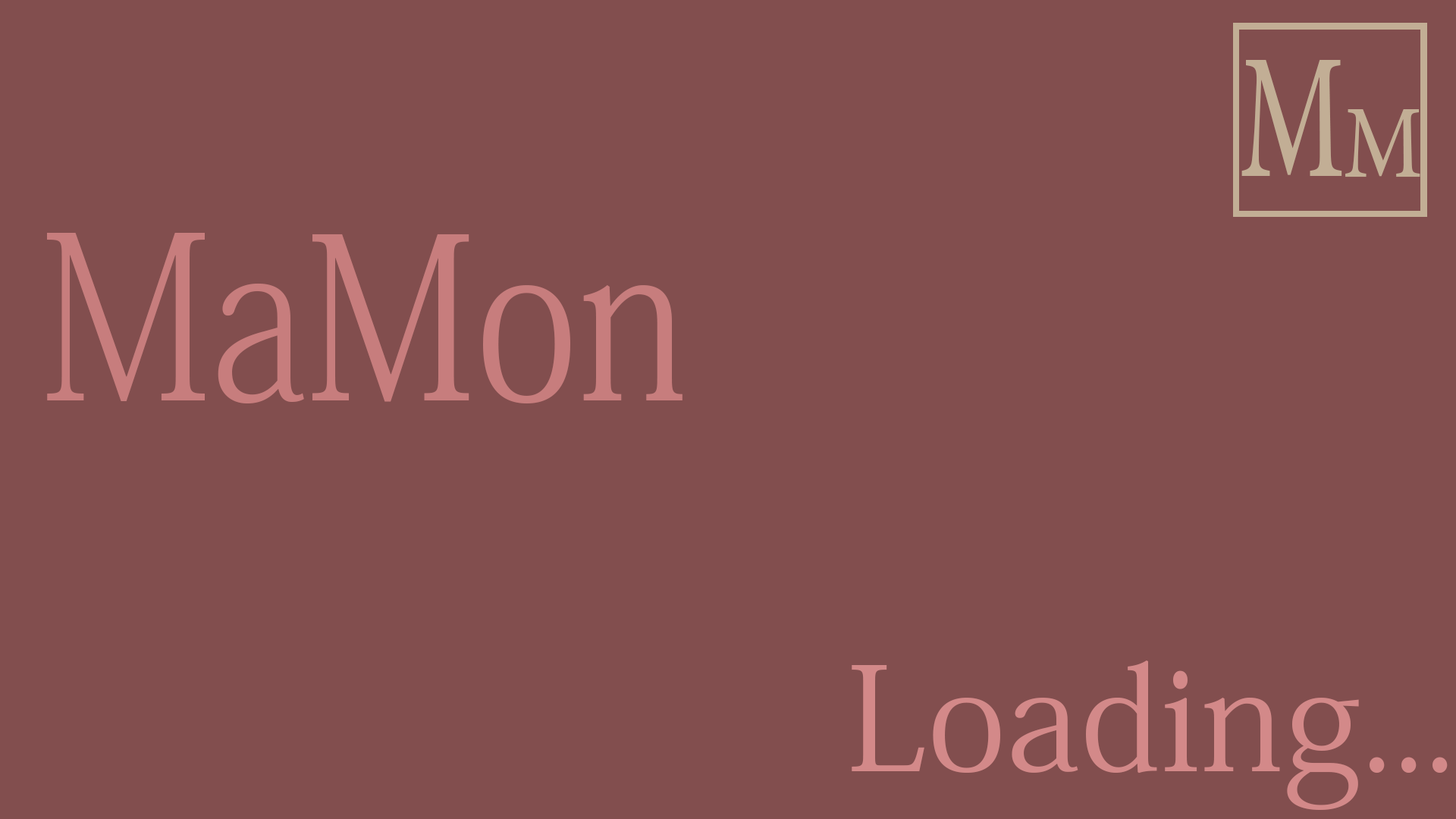
<style>
.page{position:relative;width:1456px;height:819px;background:#824e4e}
.page>*{position:absolute;margin:0}
.t1{font:176.3px "AdobeHebrew-Regular";color:#c2ae95;scale:0.66 1}
.t2{font:101.9px "AdobeHebrew-Regular";color:#c2ae95;scale:0.85 1}
.t3{font:224.2px "AdobeKaitiStd-Regular";color:#c77d7d;scale:0.83 1}
.t4{font:227.5px "AdobeFangsongStd-Regular";color:#c77d7d;scale:0.83 1}
.t5{font:143.3px "AdobeKaitiStd-Regular";color:#d38989}
</style>
<div class="page">
<p class="t1" style="left:1241px;top:60px;width:101px;height:116px">M</p>
<p class="t2" style="left:1345px;top:109px;width:75px;height:68px">M</p>
<p class="t3" style="left:47px;top:233px;width:635px;height:171px"><span class="t4">Ma</span>Mon</p>
<p class="t5" style="left:852px;top:660px;width:596px;height:150px">Loading...</p>
</div>
